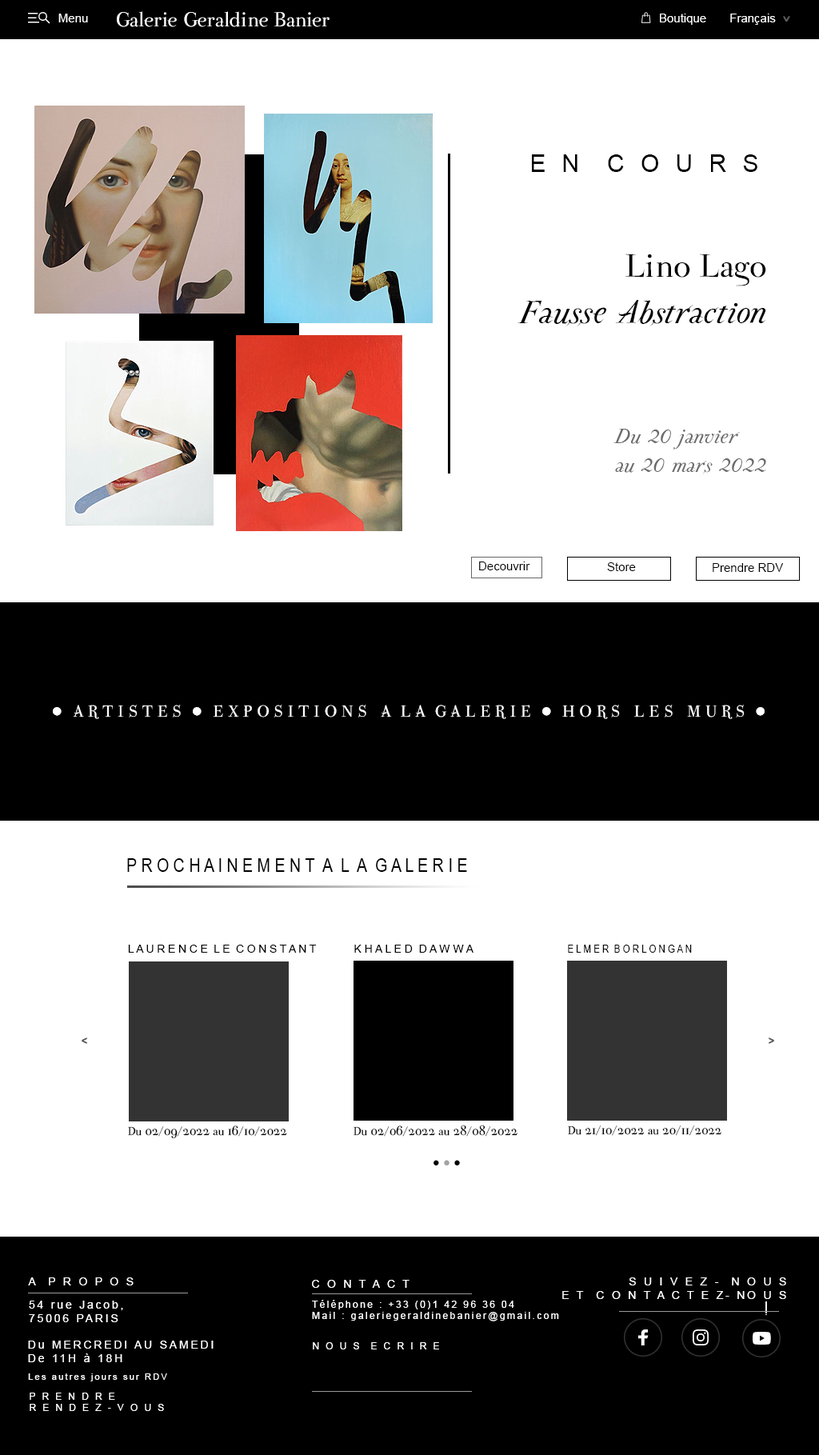
<style>
.page{position:relative;width:819px;height:1455px;background:#ffffff}
.page>*{position:absolute;margin:0}
.t1{font:12px "ArialMT";color:#ffffff}
.t2{font:24px "ParmaPetit-Normal";color:#ffffff}
.t3{font:12px "CopperplateGothic-Bold";color:#5c5c5c}
.t4{font:24px "ArialMT";letter-spacing:0.2em;color:#010101}
.t5{font:38.4px "ParmaPetit-Italic";color:#000000}
.t6{font:38.4px "ParmaPetit-Normal";color:#000000}
.t7{font:24px "ParmaPetit-Italic";color:#6b6b6b}
.t8{font:12px "ArialMT";color:#000000}
.t9{font:19.2px "ParmaPetit-Normal";color:#ffffff}
.t10{font:19.2px "ArialMT";color:#ffffff}
.t11{font:19.2px "ArialNarrow";color:#000000}
.t12{font:11px "ArialMT";color:#000000}
.t13{font:11.2px "ArialMT";color:#000000}
.t14{font:11.2px "ArialNarrow";color:#000000}
.t15{font:13.6px "ParmaPetit-Normal";color:#000000}
.t16{font:12px "ArialMT";color:#010101}
.t17{font:12px "ArialMT";color:#a3a3a3}
.t18{font:11.2px "ArialMT";letter-spacing:0.2em;color:#ffffff}
.t19{font:9.6px "ArialMT";letter-spacing:0.2em;color:#ffffff}
.t20{font:8.8px "ArialMT";letter-spacing:0.2em;color:#ffffff}
</style>
<div class="page">
<p class="t1" style="left:58px;top:14px;width:30px;height:8px">Menu</p>
<p class="t2" style="left:117px;top:11px;width:213px;height:16px">Galerie Geraldine Banier</p>
<p class="t1" style="left:660px;top:14px;width:46px;height:11px">Boutique</p>
<p class="t1" style="left:731px;top:14px;width:45px;height:11px">Français</p>
<p class="t3" style="left:783px;top:16px;width:8px;height:6px;rotate:90deg">&gt;</p>
<p class="t4" style="left:532px;top:154px;width:226px;height:18px">E N  C O U R S</p>
<p class="t5" style="left:518px;top:254px;width:249px;height:72px;text-align:right"><span class="t6">Lino Lago<br></span>Fausse Abstraction</p>
<p class="t7" style="left:614px;top:429px;width:153px;height:45px">Du 20 janvier <br>au 20 mars 2022</p>
<p class="t8" style="left:479px;top:562px;width:51px;height:8px">Decouvrir</p>
<p class="t8" style="left:607px;top:562px;width:29px;height:9px">Store</p>
<p class="t8" style="left:713px;top:563px;width:70px;height:9px">Prendre RDV</p>
<p class="t9" style="left:53px;top:705px;width:712px;height:14px"><span class="t10">●  </span>A R T I S T E S  <span class="t10">●  </span>E X P O S I T I O N S   A  L A  G A L E R I E  <span class="t10">● </span> H O R S   L E S   M U R S  <span class="t10">●</span></p>
<p class="t11" style="left:127px;top:859px;width:340px;height:13px">P R O C H A I N E M E N T  A  L  A  G A L E R I E</p>
<p class="t12" style="left:128px;top:945px;width:188px;height:8px">L A U R E N C E  L E  C O N S T A N T</p>
<p class="t13" style="left:354px;top:945px;width:120px;height:8px">K H A L E D  D A W W A</p>
<p class="t14" style="left:568px;top:945px;width:124px;height:8px">E L M E R  B O R L O N G A N</p>
<p class="t3" style="left:82px;top:1038px;width:5px;height:6px">&lt;</p>
<p class="t3" style="left:769px;top:1038px;width:6px;height:6px;rotate:-180deg">&lt;</p>
<p class="t15" style="left:128px;top:1126px;width:159px;height:13px">Du 02/09/2022 au 16/10/2022</p>
<p class="t15" style="left:354px;top:1125px;width:164px;height:12px">Du 02/06/2022 au 28/08/2022</p>
<p class="t15" style="left:568px;top:1126px;width:154px;height:10px">Du 21/10/2022 au 20/11/2022</p>
<p class="t16" style="left:434px;top:1160px;width:26px;height:6px">● <span class="t17">● </span>●</p>
<p class="t18" style="left:28px;top:1278px;width:106px;height:8px">A  P R O P O S</p>
<p class="t18" style="left:562px;top:1278px;width:225px;height:21px;text-align:right">S U I V E Z -  N O U S<br>E T  C O N T A C T E Z- NO U S</p>
<p class="t18" style="left:312px;top:1280px;width:98px;height:8px">C O N T A C T</p>
<p class="t18" style="left:29px;top:1301px;width:94px;height:22px">54 rue Jacob, <br>75006 PARIS</p>
<p class="t19" style="left:312px;top:1300px;width:247px;height:22px">Téléphone : +33 (0)1 42 96 36 04<br>Mail : galeriegeraldinebanier@gmail.com</p>
<p class="t18" style="left:28px;top:1341px;width:186px;height:22px">Du MERCREDI AU SAMEDI<br>De 11H à 18H</p>
<p class="t19" style="left:313px;top:1343px;width:126px;height:7px">N O U S  E C R I R E</p>
<p class="t20" style="left:28px;top:1374px;width:139px;height:8px">Les autres jours sur RDV</p>
<p class="t19" style="left:30px;top:1393px;width:134px;height:18px">P R E N D R E   <br>R E N D E Z - V O U S</p>
</div>
